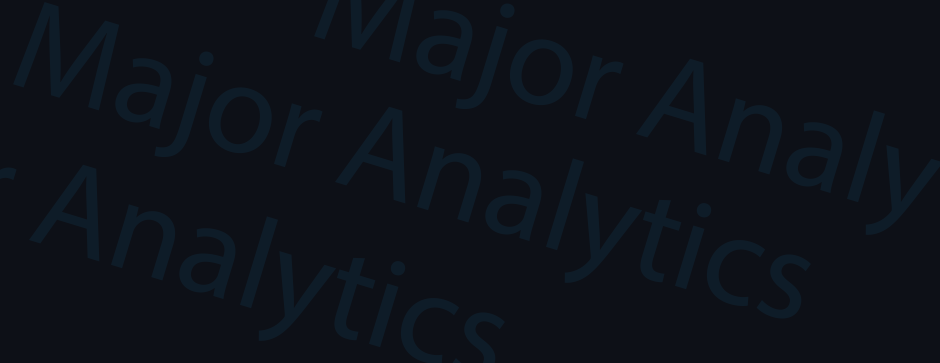
<style>
.page{position:relative;width:940px;height:363px;background:#0d1017}
.page>*{position:absolute;margin:0}
.t1{font:130px "MyriadPro-Regular";color:#0e1c28}
</style>
<div class="page">
<p class="t1" style="left:13px;top:2px;width:798px;height:317px;rotate:17deg">Major Analytics</p>
</div>
